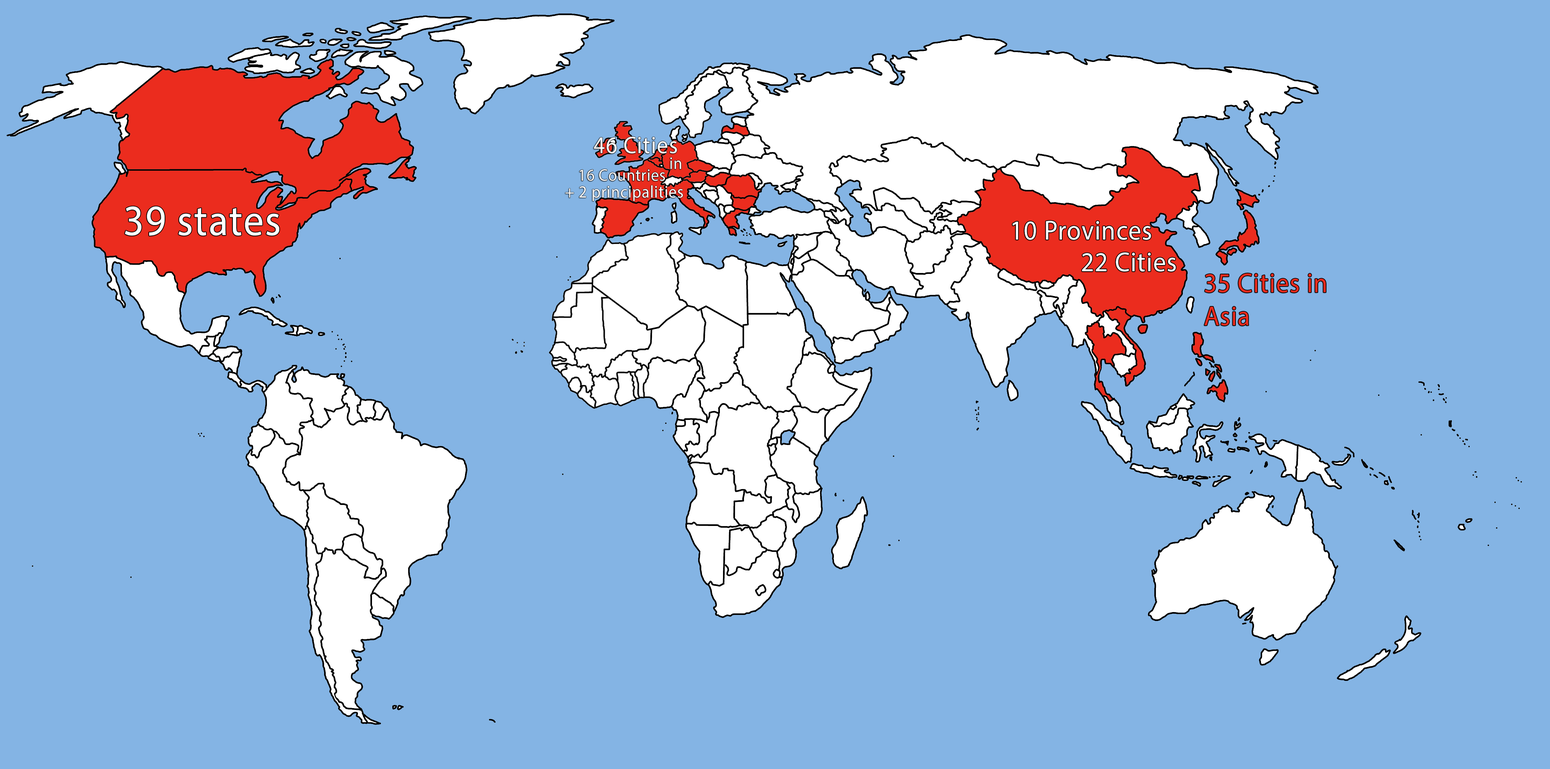
<style>
.page{position:relative;width:1550px;height:769px;background:#84b4e4}
.page>*{position:absolute;margin:0}
.t1{font:24.1px "MyriadPro-Regular";letter-spacing:0.03em;color:#ffffff;scale:0.93 1}
.t2{font:17.2px "MyriadPro-Regular";letter-spacing:0.03em;color:#ffffff;scale:0.93 1}
.t3{font:16.9px "MyriadPro-Regular";letter-spacing:0.03em;color:#ffffff;scale:0.93 1}
.t4{font:43.4px "MyriadPro-Regular";letter-spacing:0.03em;color:#ffffff;scale:0.93 1}
.t5{font:27.6px "MyriadPro-Regular";letter-spacing:0.03em;color:#ffffff;scale:0.93 1}
.t6{font:27.6px "MyriadPro-Regular";letter-spacing:0.03em;color:#eb2c1e;scale:0.93 1}
</style>
<div class="page">
<p class="t1" style="left:594px;top:137px;width:83px;height:17px">46 Cities</p>
<p class="t2" style="left:670px;top:157px;width:11px;height:12px">in</p>
<p class="t3" style="left:579px;top:169px;width:86px;height:12px">16 Countries</p>
<p class="t2" style="left:565px;top:185px;width:118px;height:16px">+ 2 principalities</p>
<p class="t4" style="left:125px;top:206px;width:154px;height:30px">39 states</p>
<p class="t5" style="left:1012px;top:221px;width:139px;height:19px">10 Provinces</p>
<p class="t5" style="left:1082px;top:252px;width:94px;height:20px">22 Cities</p>
<p class="t6" style="left:1204px;top:273px;width:122px;height:53px">35 Cities in<br>Asia</p>
</div>
